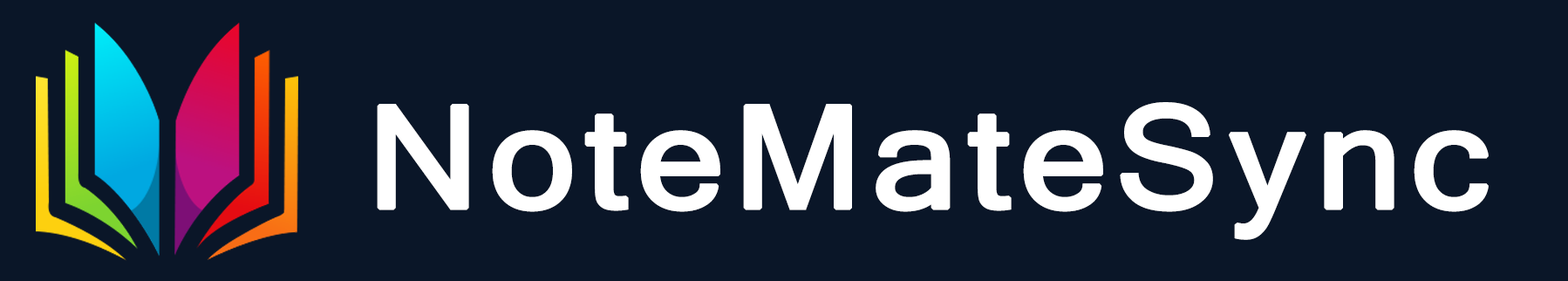
<style>
.page{position:relative;width:1568px;height:281px;background:#0a1628}
.page>*{position:absolute;margin:0}
.t1{font:142px "MicrosoftSansSerif";letter-spacing:0.035em;color:#ffffff;font-weight:bold;scale:1.09 1}
</style>
<div class="page">
<p class="t1" style="left:377px;top:102px;width:1112px;height:138px">NoteMateSync</p>
</div>
